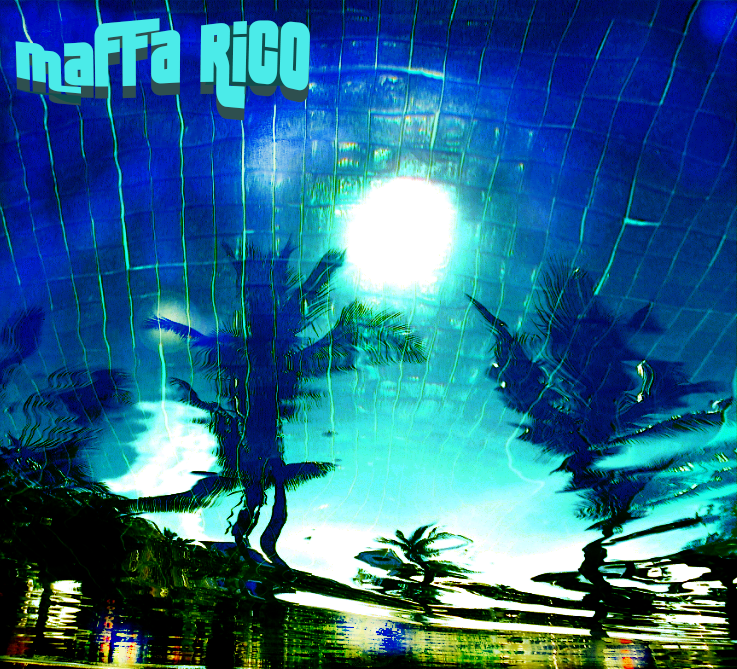
<style>
.page{position:relative;width:737px;height:669px}
.page>*{position:absolute;margin:0}
.t1{font:85px "LakmusFenotype"}
.t2{font:85px "LakmusFenotype";color:#4bebe9}
</style>
<div class="page">
<p class="t1" style="left:15px;top:30px;width:295px;height:91px">MaFFa RICO</p>
<p class="t2" style="left:15px;top:18px;width:295px;height:91px">MaFFa RICO</p>
</div>
